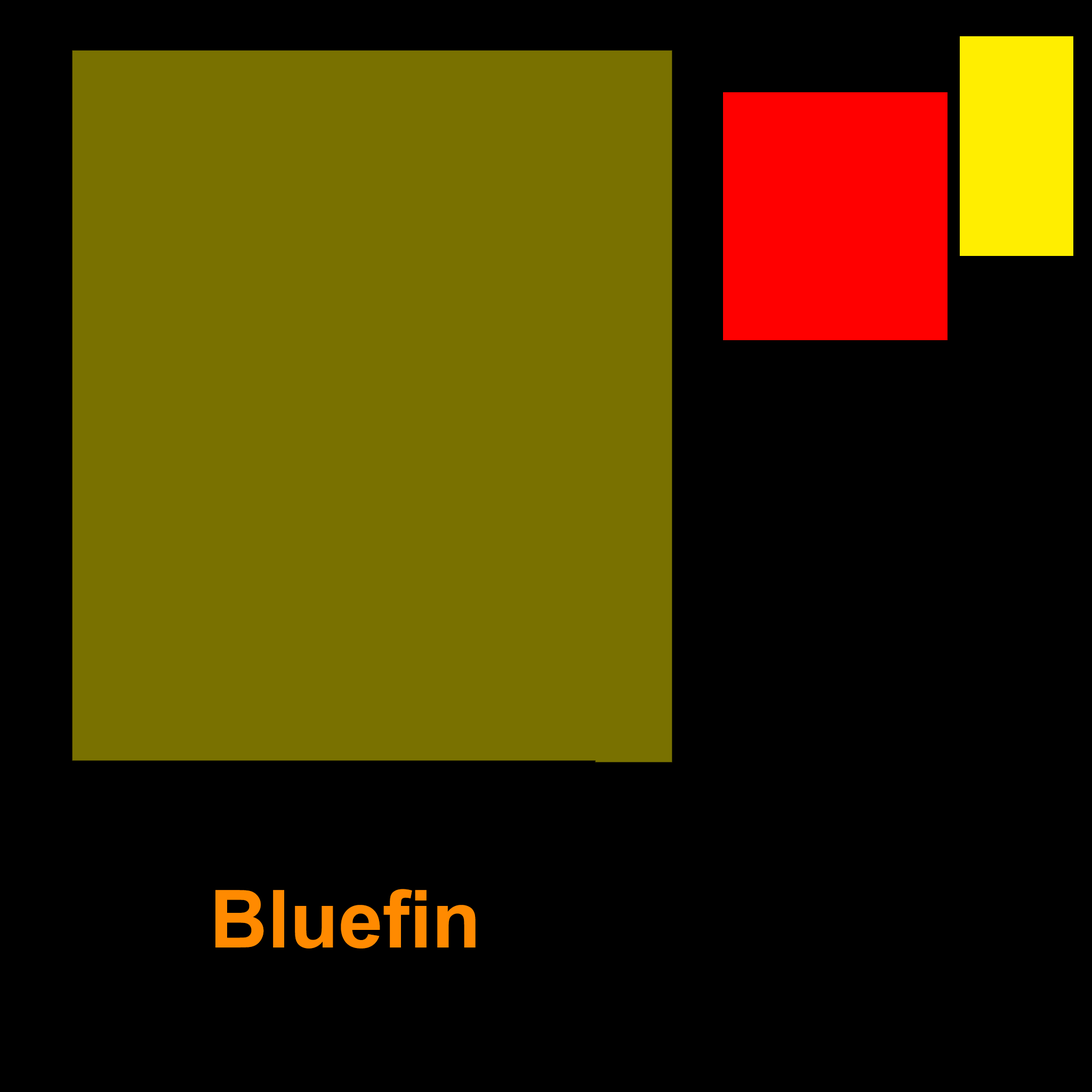
<style>
.page{position:relative;width:1092px;height:1092px;background:#000000}
.page>*{position:absolute;margin:0}
.t1{font:80px "Arial-BoldMT";color:#ff8a00}
</style>
<div class="page">
<p class="t1" style="left:215px;top:889px;width:261px;height:60px">Bluefin</p>
</div>
